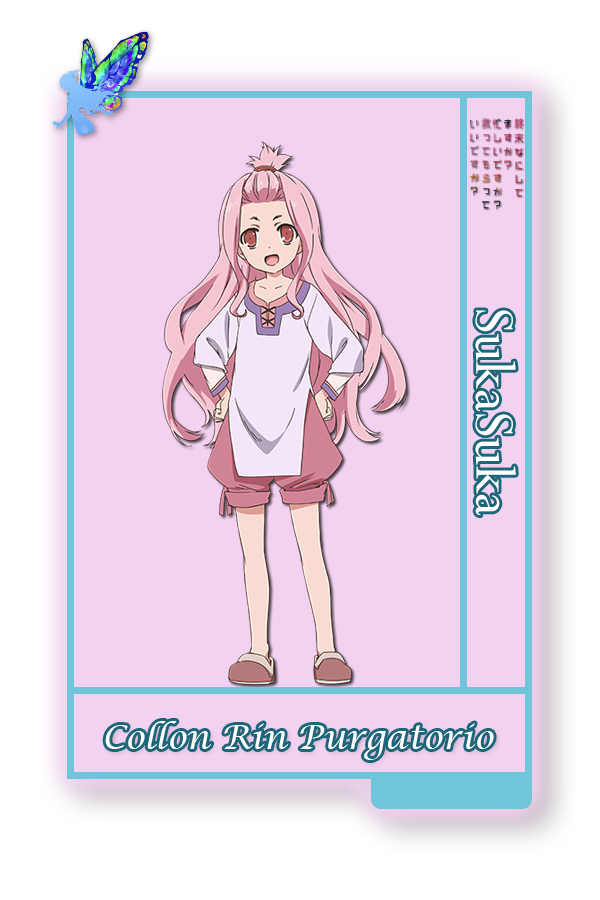
<style>
.page{position:relative;width:600px;height:900px;background:#f3d2f1}
.page>*{position:absolute;margin:0}
.t1{font:62.5px "Perpetua";color:#ffffff}
.t2{font:33.3px "LucidaCalligraphy-Italic";color:#ffffff}
</style>
<div class="page">
<p class="t1" style="left:475px;top:310px;width:41px;height:206px;rotate:90deg">SukaSuka</p>
<p class="t2" style="left:105px;top:721px;width:389px;height:39px">Collon Rin Purgatorio</p>
</div>
